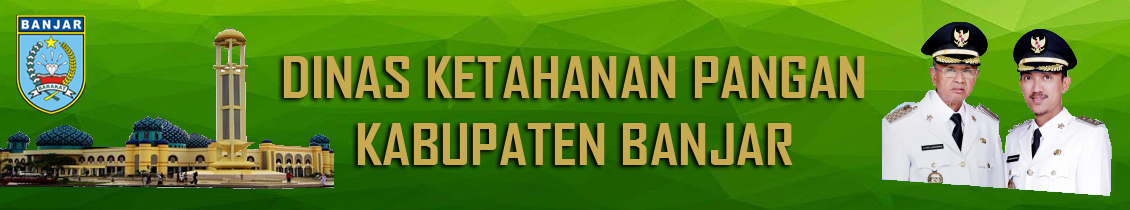
<style>
.page{position:relative;width:1130px;height:210px}
.page>*{position:absolute;margin:0}
.t1{font:55.4px "AgencyFB-Bold";color:#c8ab51;scale:1.14 1}
</style>
<div class="page">
<p class="t1" style="left:283px;top:56px;width:582px;height:109px;text-align:center">DINAS KETAHANAN PANGAN<br>KABUPATEN BANJAR</p>
</div>
